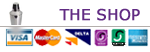
<style>
.page{position:relative;width:150px;height:52px;background:#ffffff}
.page>*{position:absolute;margin:0}
.t1{font:15px "Verdana";color:#612b83;font-weight:bold}
</style>
<div class="page">
<p class="t1" style="left:59px;top:8px;width:81px;height:13px">THE SHOP</p>
</div>
